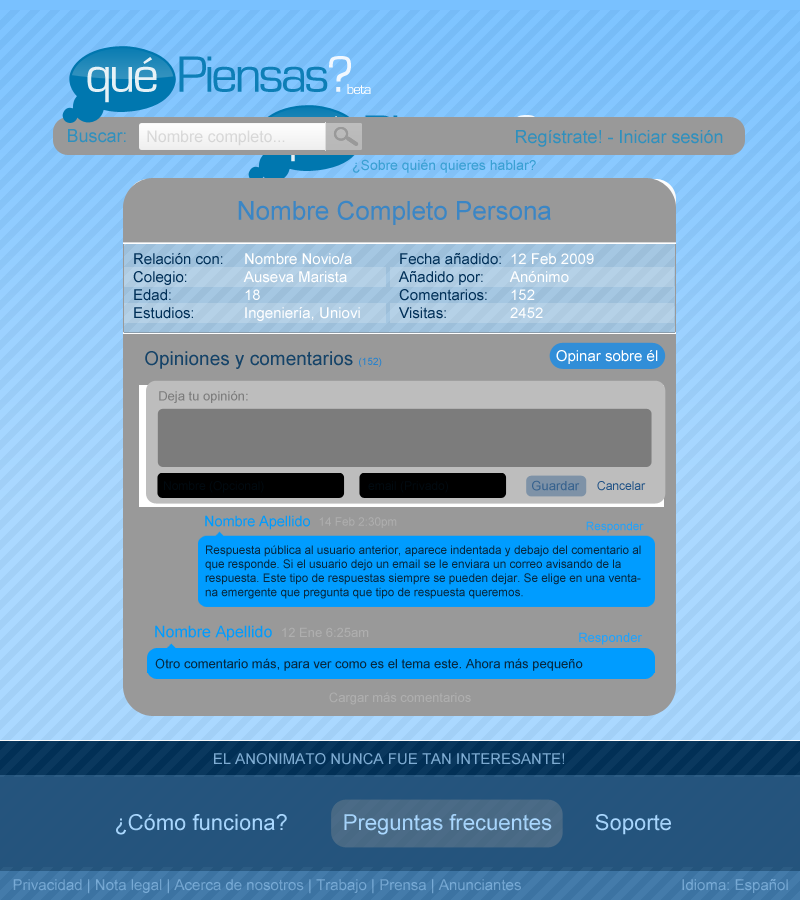
<style>
.page{position:relative;width:800px;height:900px}
.page>*{position:absolute;margin:0}
.t1{font:15px "EurostileRegular";letter-spacing:-0.06em;color:#ffffff}
.t2{font:18px "ArialMT";color:#2f90be}
.t3{font:16px "ArialMT";color:#d7d7d7}
.t4{font:26px "ArialMT";color:#3b86c5}
.t5{font:15px "ArialMT";color:#013058}
.t6{font:15px "ArialMT";color:#ffffff}
.t7{font:19px "ArialMT";color:#154368}
.t8{font:10px "ArialMT";color:#2a83cc}
.t9{font:13px "ArialMT";color:#7c7c7c}
.t10{font:12px "ArialMT";color:#010a10}
.t11{font:13px "ArialMT";color:#37628e}
.t12{font:12px "ArialMT";color:#1d5085}
.t13{font:14.4px "ArialMT";color:#009cff}
.t14{font:11.7px "ArialMT";color:#afafaf}
.t15{font:11.7px "ArialMT";color:#1fa3ff}
.t16{font:11.7px "ArialMT";color:#072941}
.t17{font:16px "ArialMT";color:#009cff}
.t18{font:13px "ArialMT";color:#afafaf}
.t19{font:13px "ArialMT";color:#1fa3ff}
.t20{font:13px "ArialMT";color:#072941}
.t21{font:15px "ArialMT";color:#79a6cd}
.t22{font:22px "ArialMT";color:#a8d7ff}
.t23{font:15px "ArialMT";color:#71a3ce}
.t24{font:15px "ArialMT";color:#75a7d2}
</style>
<div class="page">
<p class="t1" style="left:347px;top:84px;width:24px;height:10px">beta</p>
<p class="t2" style="left:68px;top:129px;width:58px;height:14px">Buscar:</p>
<p class="t3" style="left:147px;top:130px;width:138px;height:16px">Nombre completo...</p>
<p class="t2" style="left:516px;top:130px;width:207px;height:17px">Regístrate! - Iniciar sesión</p>
<p class="t4" style="left:238px;top:200px;width:313px;height:25px">Nombre Completo Persona</p>
<p class="t5" style="left:133px;top:253px;width:90px;height:66px">Relación con:<br>Colegio:<br>Edad:<br>Estudios:</p>
<p class="t6" style="left:243px;top:253px;width:117px;height:68px">Nombre Novio/a<br>Auseva Marista<br>18<br>Ingeniería, Uniovi</p>
<p class="t5" style="left:398px;top:253px;width:103px;height:66px">Fecha añadido:<br>Añadido por:<br>Comentarios:<br>Visitas:</p>
<p class="t6" style="left:509px;top:253px;width:85px;height:65px">12 Feb 2009<br>Anónimo<br>152<br>2452</p>
<p class="t7" style="left:145px;top:351px;width:237px;height:18px">Opiniones y comentarios <span class="t8">(152)</span></p>
<p class="t6" style="left:556px;top:350px;width:102px;height:14px">Opinar sobre él</p>
<p class="t9" style="left:159px;top:391px;width:89px;height:12px">Deja tu opinión:</p>
<p class="t10" style="left:164px;top:481px;width:100px;height:12px">Nombre (Opcional)</p>
<p class="t10" style="left:368px;top:481px;width:80px;height:12px">email (Privado)</p>
<p class="t11" style="left:532px;top:480px;width:48px;height:11px">Guardar</p>
<p class="t12" style="left:597px;top:481px;width:49px;height:10px">Cancelar</p>
<p class="t13" style="left:205px;top:515px;width:105px;height:15px">Nombre Apellido</p>
<p class="t14" style="left:319px;top:517px;width:78px;height:11px">14 Feb 2:30pm</p>
<p class="t15" style="left:586px;top:521px;width:58px;height:12px">Responder</p>
<p class="t16" style="left:205px;top:545px;width:436px;height:54px">Respuesta pública al usuario anterior, aparece indentada y debajo del comentario al que responde. Si el usuario dejo un email se le enviara un correo avisando de la respuesta. Este tipo de respuestas siempre se pueden dejar. Se elige en una ventana emergente que pregunta que tipo de respuesta queremos.</p>
<p class="t17" style="left:155px;top:625px;width:117px;height:16px">Nombre Apellido</p>
<p class="t18" style="left:282px;top:627px;width:87px;height:10px">12 Ene 6:25am</p>
<p class="t19" style="left:579px;top:632px;width:63px;height:13px">Responder</p>
<p class="t20" style="left:155px;top:658px;width:428px;height:13px">Otro comentario más, para ver como es el tema este. Ahora más pequeño</p>
<p class="t18" style="left:329px;top:692px;width:142px;height:13px">Cargar más comentarios</p>
<p class="t21" style="left:214px;top:753px;width:350px;height:12px">EL ANONIMATO NUNCA FUE TAN INTERESANTE!</p>
<p class="t22" style="left:116px;top:814px;width:555px;height:21px">¿Cómo funciona?         Preguntas frecuentes       Soporte</p>
<p class="t23" style="left:13px;top:879px;width:508px;height:15px">Privacidad | Nota legal | Acerca de nosotros | Trabajo | Prensa | Anunciantes</p>
<p class="t24" style="left:682px;top:879px;width:106px;height:14px">Idioma: Español</p>
</div>
